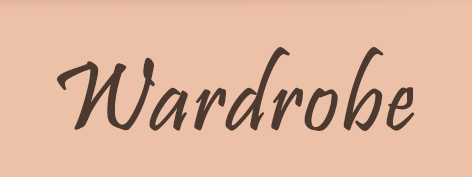
<style>
.page{position:relative;width:472px;height:177px;background:#edc0a8}
.page>*{position:absolute;margin:0}
.t1{font:100px "Pristina-Regular";color:#4c3a31;font-weight:bold}
</style>
<div class="page">
<p class="t1" style="left:57px;top:47px;width:358px;height:84px">Wardrobe</p>
</div>
